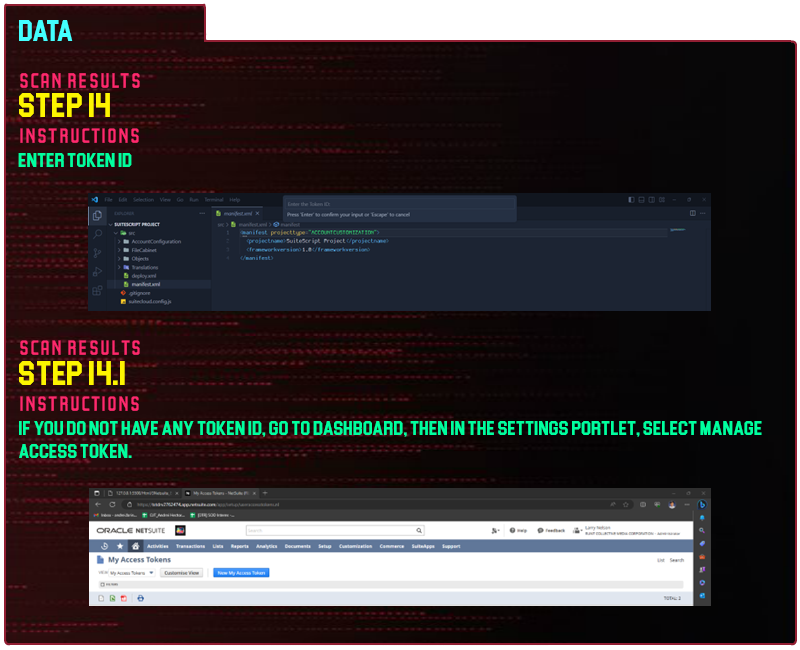
<style>
.page{position:relative;width:800px;height:650px}
.page>*{position:absolute;margin:0}
.t1{font:30px "Blockletter";color:#43ffff}
.t2{font:35px "Party-Lights-[WLM]-Flat";color:#ff296d}
.t3{font:35px "Blockletter";color:#fdf500}
.t4{font:20px "Blockletter";color:#00ff9f}
.t5{font:34.9px "Party-Lights-[WLM]-Flat";color:#ff296d}
.t6{font:34.9px "Blockletter";color:#fdf500}
.t7{font:19.9px "Blockletter";color:#00ff9f}
</style>
<div class="page">
<p class="t1" style="left:19px;top:20px;width:54px;height:21px">Data</p>
<p class="t2" style="left:20px;top:73px;width:120px;height:15px">Scan REsults</p>
<p class="t3" style="left:19px;top:93px;width:91px;height:24px">Step 14</p>
<p class="t2" style="left:20px;top:128px;width:119px;height:15px">instructions</p>
<p class="t4" style="left:18px;top:153px;width:114px;height:14px">enter token id</p>
<p class="t5" style="left:20px;top:340px;width:120px;height:15px">Scan REsults</p>
<p class="t6" style="left:19px;top:361px;width:106px;height:24px">Step 14.1</p>
<p class="t5" style="left:20px;top:396px;width:119px;height:15px">instructions</p>
<p class="t7" style="left:19px;top:421px;width:743px;height:37px">if you do not have any token id, go to dashboard, then in the settings portlet, Select manage access token.</p>
</div>
